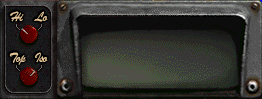
<style>
.page{position:relative;width:262px;height:99px}
.page>*{position:absolute;margin:0}
.t1{font:14.2px "BrushScriptMT";letter-spacing:-0.05em;color:#e8c898}
</style>
<div class="page">
<p class="t1" style="left:10px;top:11px;width:38px;height:11px">Hi    Lo</p>
<p class="t1" style="left:9px;top:52px;width:39px;height:13px">Top   Iso</p>
</div>
